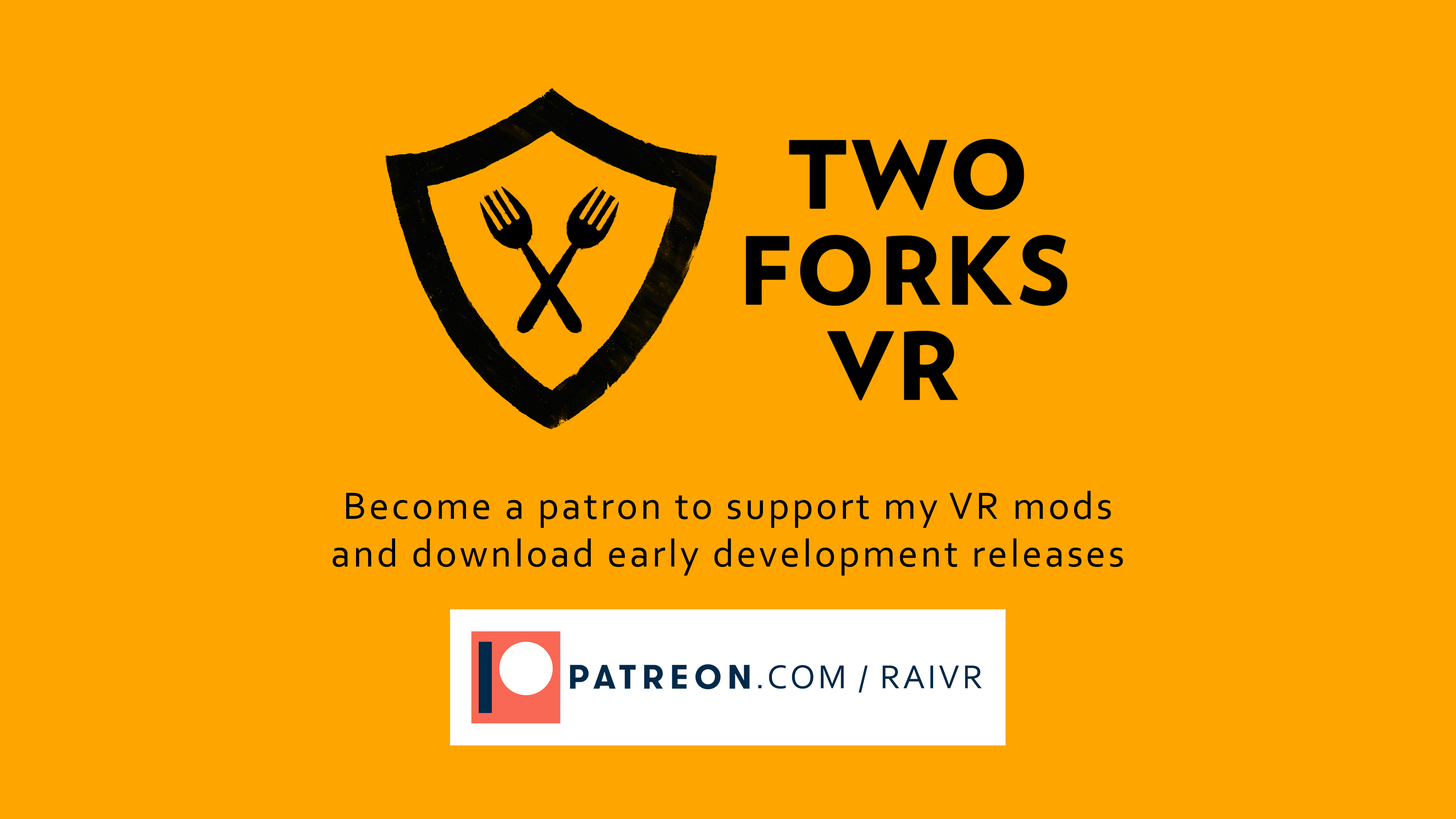
<style>
.page{position:relative;width:1456px;height:819px;background:#ffa500}
.page>*{position:absolute;margin:0}
.t1{font:39.7px "Corbel";letter-spacing:0.07em;color:#000000}
.t2{font:34.9px "Corbel";letter-spacing:0.07em;color:#012949}
</style>
<div class="page">
<p class="t1" style="left:333px;top:491px;width:790px;height:85px;text-align:center">Become a patron to support my VR mods<br>and download early development releases</p>
<p class="t2" style="left:758px;top:665px;width:224px;height:28px">.COM / RAIVR</p>
</div>
